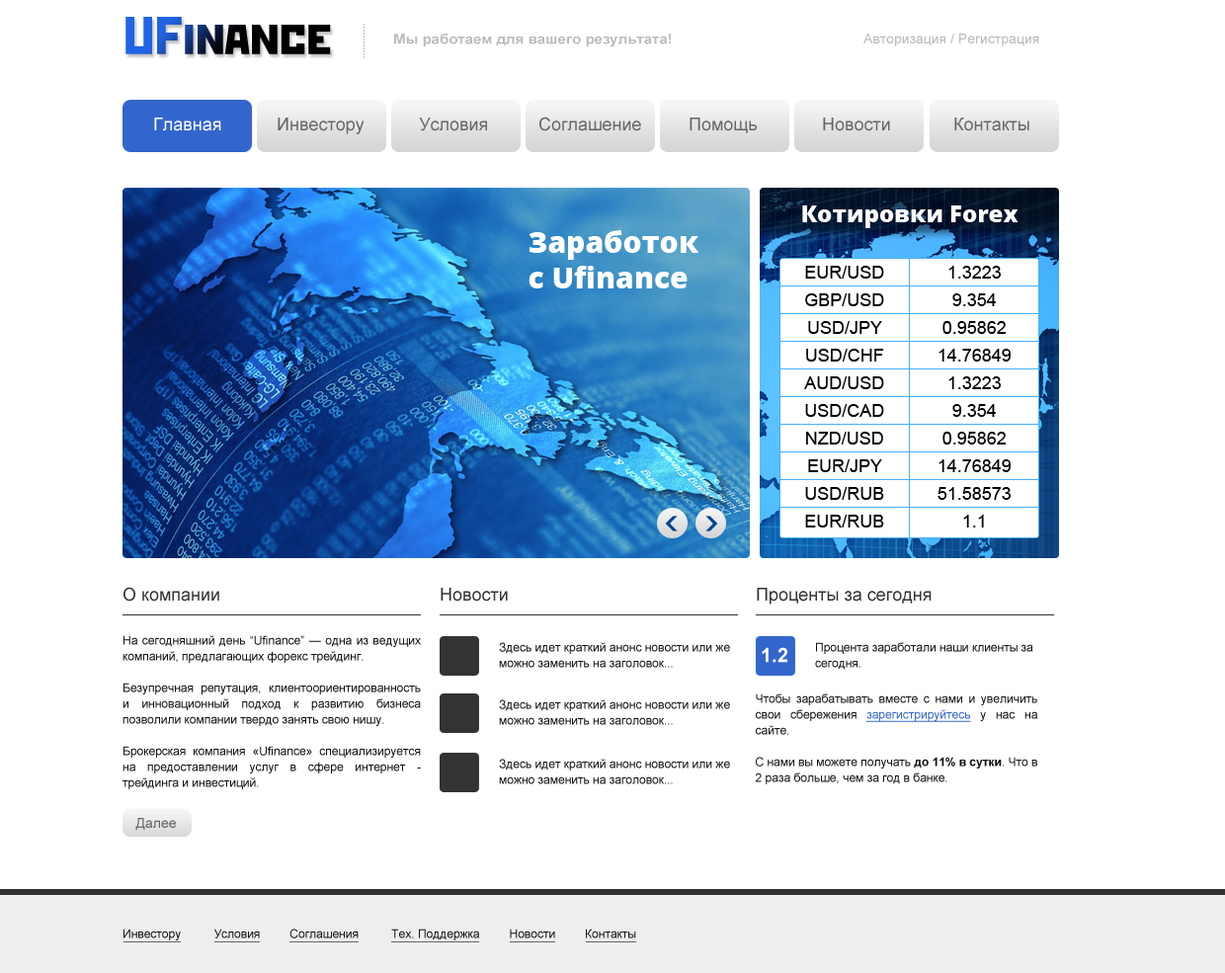
<style>
.page{position:relative;width:1225px;height:973px;background:#ffffff}
.page>*{position:absolute;margin:0}
.t1{font:13.8px "Arial-BoldMT";color:#bbbbbb;scale:1.07 1}
.t2{font:13.8px "ArialMT";color:#bbbbbb}
.t3{font:17.8px "ArialMT";color:#fffefe}
.t4{font:17.8px "ArialMT";color:#666666}
.t5{font:23.7px "OpenSans-Extrabold";color:#ffffff}
.t6{font:29.6px "OpenSans-Extrabold";color:#ffffff}
.t7{font:17.8px/27.7px "ArialMT";color:#000000}
.t8{font:17.8px "ArialMT";color:#333333}
.t9{font:11.9px/15.8px "ArialMT";color:#111111}
.t10{font:19.8px "Arial-BoldMT";color:#ffffff}
.t11{font:11.9px/15.8px "ArialMT";color:#3366cc;text-decoration:underline}
.t12{font:11.9px/15.8px "Arial-BoldMT";color:#111111}
.t13{font:13.8px "ArialMT";color:#666666}
.t14{font:11.9px "ArialMT";color:#111111}
</style>
<div class="page">
<p class="t1" style="left:394px;top:34px;width:277px;height:13px">Мы работаем для вашего результата!</p>
<p class="t2" style="left:864px;top:34px;width:175px;height:12px">Авторизация / Регистрация</p>
<p class="t3" style="left:154px;top:118px;width:67px;height:13px">Главная</p>
<p class="t4" style="left:278px;top:118px;width:87px;height:16px">Инвестору</p>
<p class="t4" style="left:419px;top:118px;width:68px;height:13px">Условия</p>
<p class="t4" style="left:539px;top:117px;width:102px;height:14px">Соглашение</p>
<p class="t4" style="left:690px;top:118px;width:67px;height:15px">Помощь</p>
<p class="t4" style="left:823px;top:118px;width:67px;height:13px">Новости</p>
<p class="t4" style="left:954px;top:118px;width:76px;height:13px">Контакты</p>
<p class="t5" style="left:802px;top:206px;width:217px;height:22px">Котировки Forex</p>
<p class="t6" style="left:529px;top:230px;width:171px;height:59px">Заработок с Ufinance</p>
<p class="t7" style="left:804px;top:266px;width:80px;height:262px;text-align:center">EUR/USD<br>GBP/USD<br>USD/JPY<br>USD/CHF<br>AUD/USD<br>USD/CAD<br>NZD/USD<br>EUR/JPY<br>USD/RUB<br>EUR/RUB</p>
<p class="t7" style="left:938px;top:266px;width:73px;height:262px;text-align:center">1.3223<br>9.354<br>0.95862<br>14.76849<br>1.3223<br>9.354<br>0.95862<br>14.76849<br>51.58573<br>1.1</p>
<p class="t8" style="left:124px;top:587px;width:95px;height:15px">О компании</p>
<p class="t8" style="left:441px;top:588px;width:67px;height:14px">Новости</p>
<p class="t8" style="left:757px;top:588px;width:175px;height:17px">Проценты за сегодня</p>
<p class="t9" style="left:123px;top:635px;width:298px;height:154px;text-align:justify">На сегодняшний день “Ufinance” — одна из ведущих компаний, предлагающих форекс трейдинг. <br><br>Безупречная репутация, клиентоориентированность и инновационный подход к развитию бизнеса позволили компании твердо занять свою нишу. <br><br>Брокерская компания «Ufinance» специализируется на предоставлении услуг в сфере интернет - трейдинга и инвестиций.</p>
<p class="t9" style="left:499px;top:642px;width:231px;height:26px">Здесь идет краткий анонс новости или же можно заменить на заголовок...</p>
<p class="t10" style="left:762px;top:647px;width:25px;height:16px">1.2</p>
<p class="t9" style="left:815px;top:642px;width:219px;height:28px">Процента заработали наши клиенты за сегодня.</p>
<p class="t9" style="left:499px;top:700px;width:231px;height:25px">Здесь идет краткий анонс новости или же можно заменить на заголовок...</p>
<p class="t9" style="left:755px;top:694px;width:282px;height:91px;text-align:justify">Чтобы зарабатывать вместе с нами и увеличить свои сбережения <span class="t11">зарегистрируйтесь</span> у нас на сайте.<br><br>С нами вы можете получать <span class="t12">до 11% в сутки</span>. Что в 2 раза больше, чем за год в банке.</p>
<p class="t9" style="left:499px;top:759px;width:231px;height:26px">Здесь идет краткий анонс новости или же можно заменить на заголовок...</p>
<p class="t13" style="left:135px;top:818px;width:41px;height:13px">Далее</p>
<p class="t14" style="left:124px;top:929px;width:512px;height:12px">Инвестору          Условия         Соглашения          Тех. Поддержка         Новости         Контакты</p>
</div>
